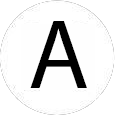
<style>
.page{position:relative;width:115px;height:115px;background:#ffffff}
.page>*{position:absolute;margin:0}
.t1{font:100px "MyriadPro-Regular";color:#000000}
</style>
<div class="page">
<p class="t1" style="left:30px;top:21px;width:57px;height:67px">A</p>
</div>
